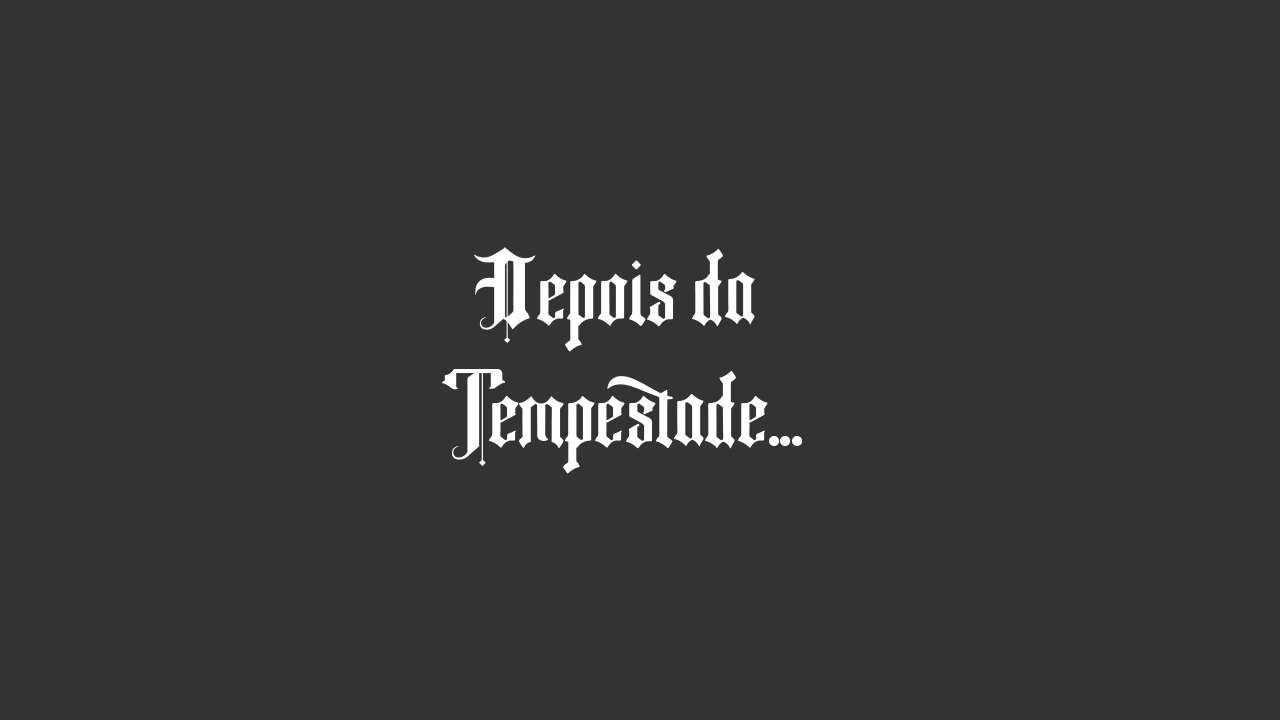
<style>
.page{position:relative;width:1280px;height:720px;background:#333333}
.page>*{position:absolute;margin:0}
.t1{font:101.6px "FancyQuisley-Regular";color:#ffffff}
</style>
<div class="page">
<p class="t1" style="left:442px;top:247px;width:361px;height:227px;text-align:center">Depois da  <br> Tempestade...</p>
</div>
